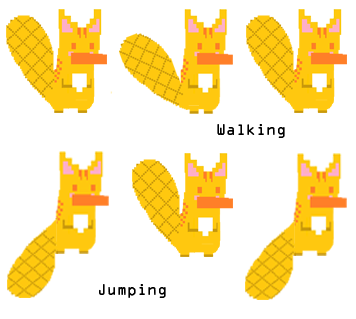
<style>
.page{position:relative;width:356px;height:319px;background:#ffffff}
.page>*{position:absolute;margin:0}
.t1{font:14px "OCRAStd";color:#000000}
</style>
<div class="page">
<p class="t1" style="left:217px;top:124px;width:68px;height:14px">Walking</p>
<p class="t1" style="left:99px;top:284px;width:67px;height:14px">Jumping</p>
</div>
